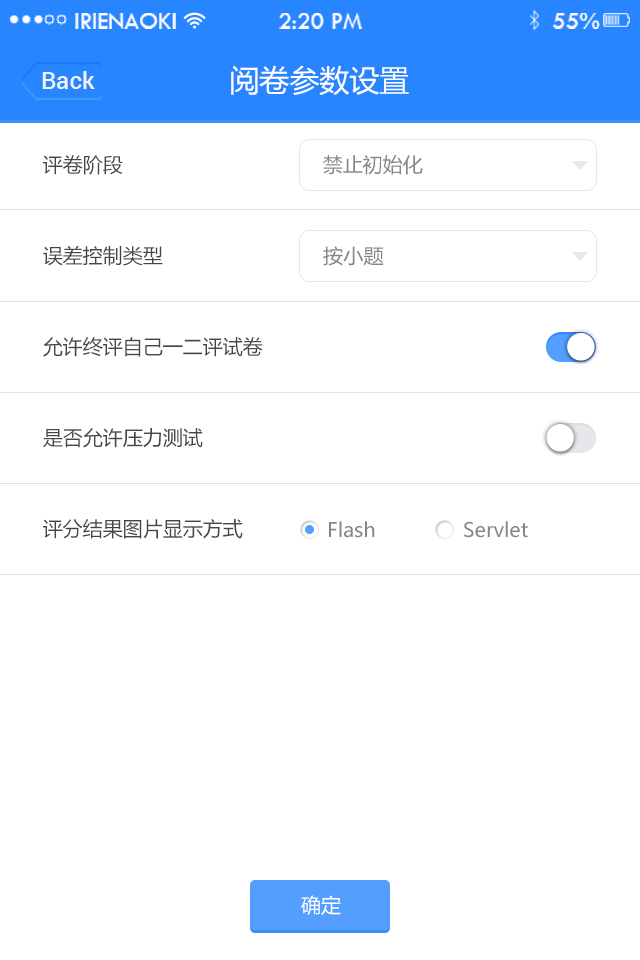
<style>
.page{position:relative;width:640px;height:960px;background:#ffffff}
.page>*{position:absolute;margin:0}
.t1{font:24px "TwCenMT-Regular";color:#ffffff}
.t2{font:30px "MicrosoftYaHei";color:#ffffff}
.t3{font:24px "Roboto-Medium";color:#f0f2f5}
.t4{font:20px "MicrosoftYaHei";color:#464646}
.t5{font:20px "MicrosoftYaHei";color:#868686}
.t6{font:19.8px "MicrosoftYaHei";color:#868686}
.t7{font:20px "MicrosoftYaHei";color:#ffffff}
</style>
<div class="page">
<p class="t1" style="left:75px;top:13px;width:101px;height:16px">IRIENAOKI</p>
<p class="t1" style="left:279px;top:13px;width:83px;height:16px">2:20 PM</p>
<p class="t1" style="left:553px;top:13px;width:47px;height:16px">55%</p>
<p class="t2" style="left:231px;top:65px;width:178px;height:30px">阅卷参数设置</p>
<p class="t3" style="left:42px;top:71px;width:53px;height:18px">Back</p>
<p class="t4" style="left:43px;top:155px;width:80px;height:20px">评卷阶段</p>
<p class="t5" style="left:323px;top:155px;width:100px;height:20px">禁止初始化</p>
<p class="t4" style="left:43px;top:245px;width:120px;height:21px">误差控制类型</p>
<p class="t5" style="left:323px;top:246px;width:61px;height:20px">按小题</p>
<p class="t4" style="left:43px;top:337px;width:220px;height:20px">允许终评自己一二评试卷</p>
<p class="t4" style="left:43px;top:428px;width:160px;height:20px">是否允许压力测试</p>
<p class="t4" style="left:43px;top:519px;width:200px;height:20px">评分结果图片显示方式</p>
<p class="t6" style="left:329px;top:521px;width:46px;height:17px">Flash</p>
<p class="t6" style="left:464px;top:521px;width:64px;height:17px">Servlet</p>
<p class="t7" style="left:301px;top:895px;width:40px;height:20px">确定</p>
</div>
